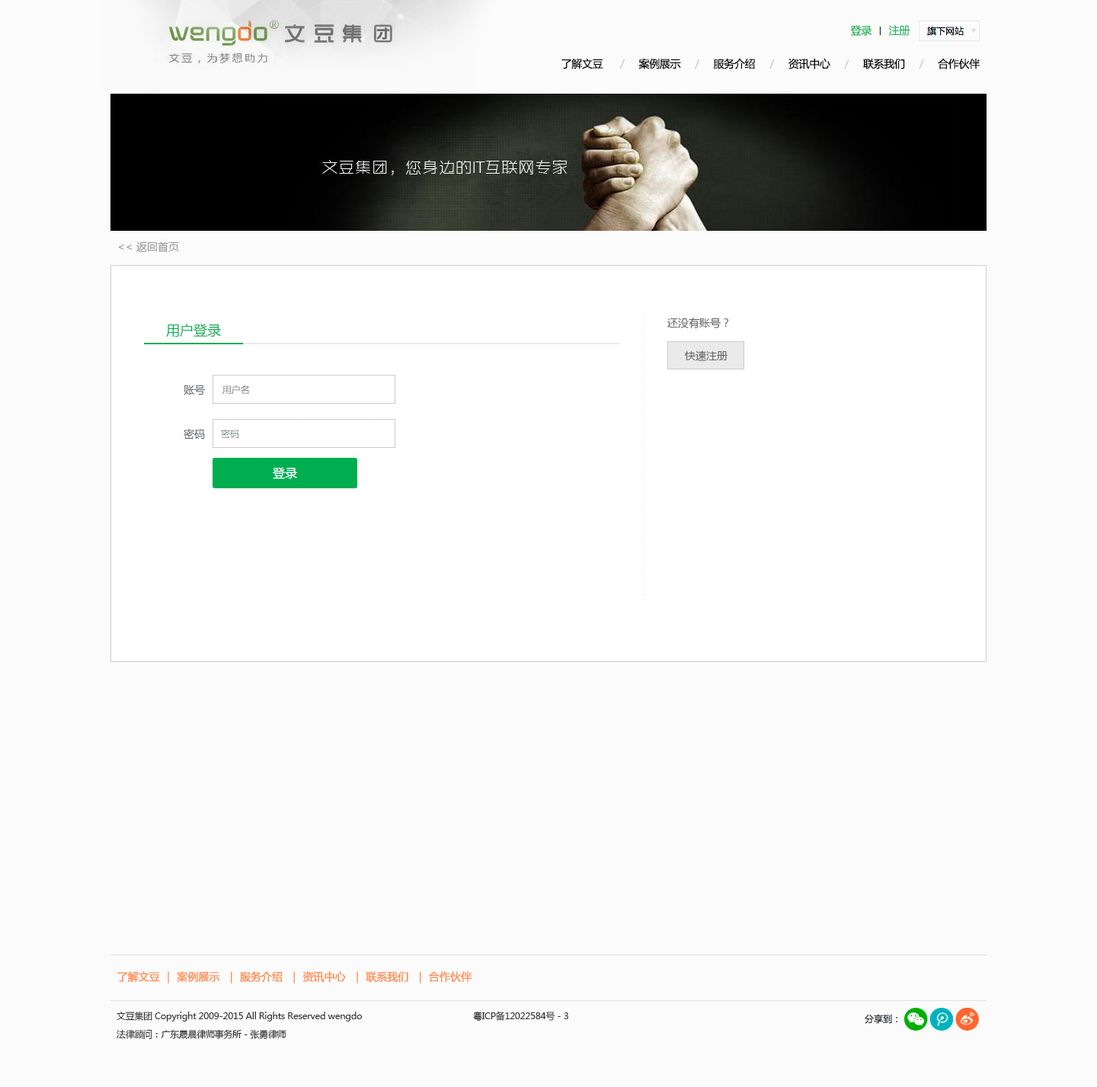
<style>
.page{position:relative;width:1097px;height:1087px;background:#fbfbfb}
.page>*{position:absolute;margin:0}
.t1{font:10.7px "MicrosoftYaHei";letter-spacing:-0.025em;color:#23b35c}
.t2{font:10.7px "MicrosoftYaHei";letter-spacing:-0.025em;color:#010101}
.t3{font:10.7px "MicrosoftYaHei";letter-spacing:-0.025em;color:#cccccc}
.t4{font:10.7px "MicrosoftYaHei";color:#999999}
.t5{font:10.7px "MicrosoftYaHei";color:#666666}
.t6{font:13.7px "MicrosoftYaHei";color:#00ae50}
.t7{font:10.7px "MicrosoftYaHei";letter-spacing:-0.025em;color:#ff8f54;font-weight:bold}
.t8{font:9.1px/18.3px "MicrosoftYaHei";letter-spacing:-0.025em;color:#333333}
</style>
<div class="page">
<p class="t1" style="left:850px;top:25px;width:22px;height:11px">登录</p>
<p class="t1" style="left:888px;top:25px;width:22px;height:11px">注册</p>
<p class="t2" style="left:561px;top:58px;width:419px;height:11px">了解文豆      <span class="t3">/     </span>案例展示     <span class="t3">/     </span>服务介绍     <span class="t3">/     </span>资讯中心     <span class="t3">/     </span>联系我们     <span class="t3">/     </span>合作伙伴</p>
<p class="t4" style="left:118px;top:241px;width:61px;height:11px">&lt;&lt; 返回首页</p>
<p class="t5" style="left:667px;top:318px;width:62px;height:11px">还没有账号？</p>
<p class="t6" style="left:166px;top:324px;width:55px;height:13px">用户登录</p>
<p class="t5" style="left:685px;top:350px;width:42px;height:11px">快速注册</p>
<p class="t7" style="left:117px;top:971px;width:355px;height:12px">了解文豆 ｜ 案例展示  ｜ 服务介绍  ｜ 资讯中心  ｜ 联系我们  ｜ 合作伙伴</p>
<p class="t8" style="left:117px;top:1011px;width:451px;height:28px">文豆集团 Copyright 2009-2015 All Rights Reserved wengdo     粤ICP备12022584号－3<br>法律顾问：广东晟晨律师事务所－张勇律师</p>
</div>
